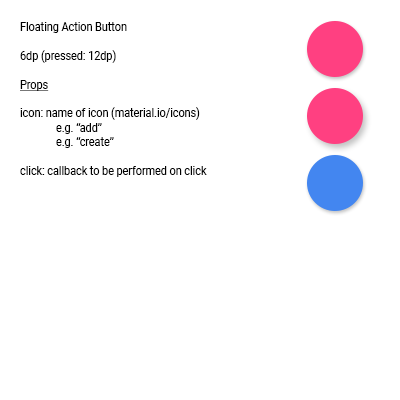
<style>
.page{position:relative;width:400px;height:400px;background:#ffffff}
.page>*{position:absolute;margin:0}
.t1{font:12px "Roboto-Regular";color:#000000;scale:0.9 1}
.t2{font:12px "Roboto-Regular";color:#000000;text-decoration:underline;scale:0.9 1}
</style>
<div class="page">
<p class="t1" style="left:20px;top:22px;width:187px;height:155px">Floating Action Button<br><br>6dp (pressed: 12dp)<br><br><span class="t2">Props<br><br></span>icon: name of icon (material.io/icons)<br> e.g. “add”<br> e.g. “create”<br><br>click: callback to be performed on click</p>
</div>
